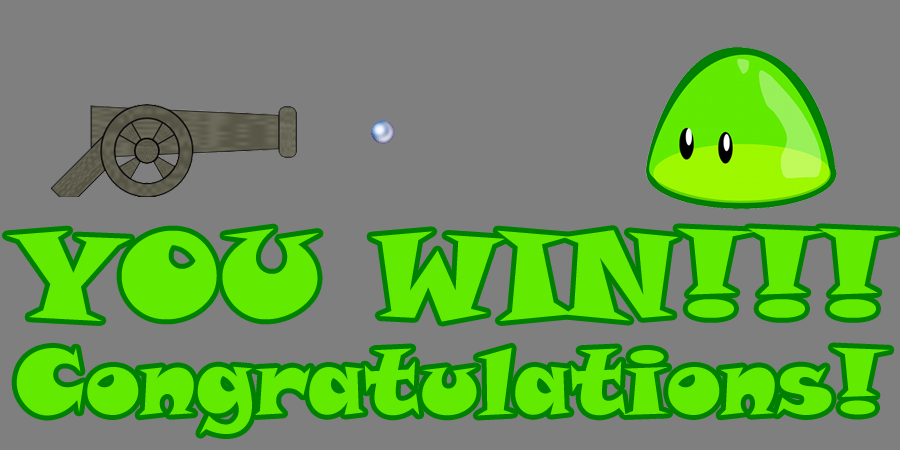
<style>
.page{position:relative;width:900px;height:450px;background:#7f7f7f}
.page>*{position:absolute;margin:0}
.t1{font:120px "SnapITC-Regular";color:#62ea00}
.t2{font:90px "SnapITC-Regular";color:#62ea00}
</style>
<div class="page">
<p class="t1" style="left:6px;top:228px;width:891px;height:94px">YOU WIN!!!</p>
<p class="t2" style="left:16px;top:347px;width:874px;height:87px">Congratulations!</p>
</div>
